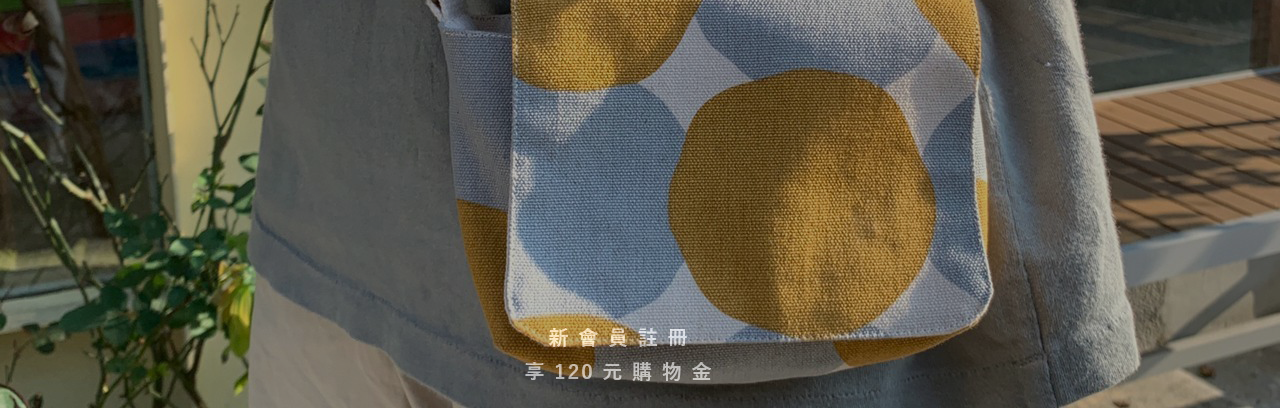
<style>
.page{position:relative;width:1280px;height:408px}
.page>*{position:absolute;margin:0}
.t1{font:20px/34px "YuGothic-Bold";letter-spacing:0.1em}
</style>
<div class="page">
<p class="t1" style="left:525px;top:328px;width:186px;height:53px;text-align:center">新 會 員 註 冊<br>享 120 元 購 物 金</p>
</div>
